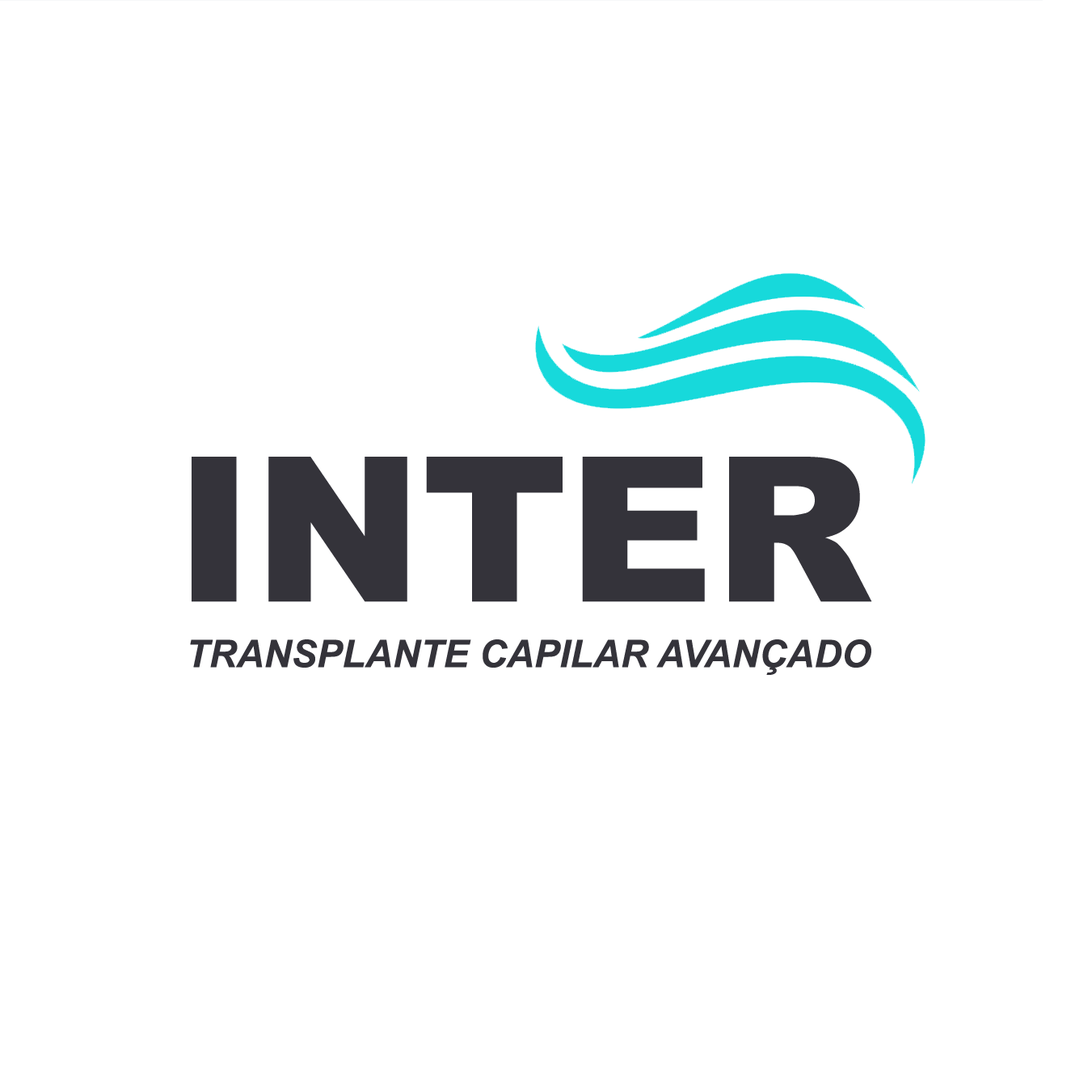
<style>
.page{position:relative;width:1092px;height:1092px;background:#ffffff}
.page>*{position:absolute;margin:0}
.t1{font:202.1px "Arial-Black";color:#34333a}
.t2{font:38px "Arial-BoldItalicMT";color:#34333a}
</style>
<div class="page">
<p class="t1" style="left:192px;top:457px;width:680px;height:145px">INTER</p>
<p class="t2" style="left:190px;top:639px;width:681px;height:36px">TRANSPLANTE CAPILAR AVANÇADO</p>
</div>
